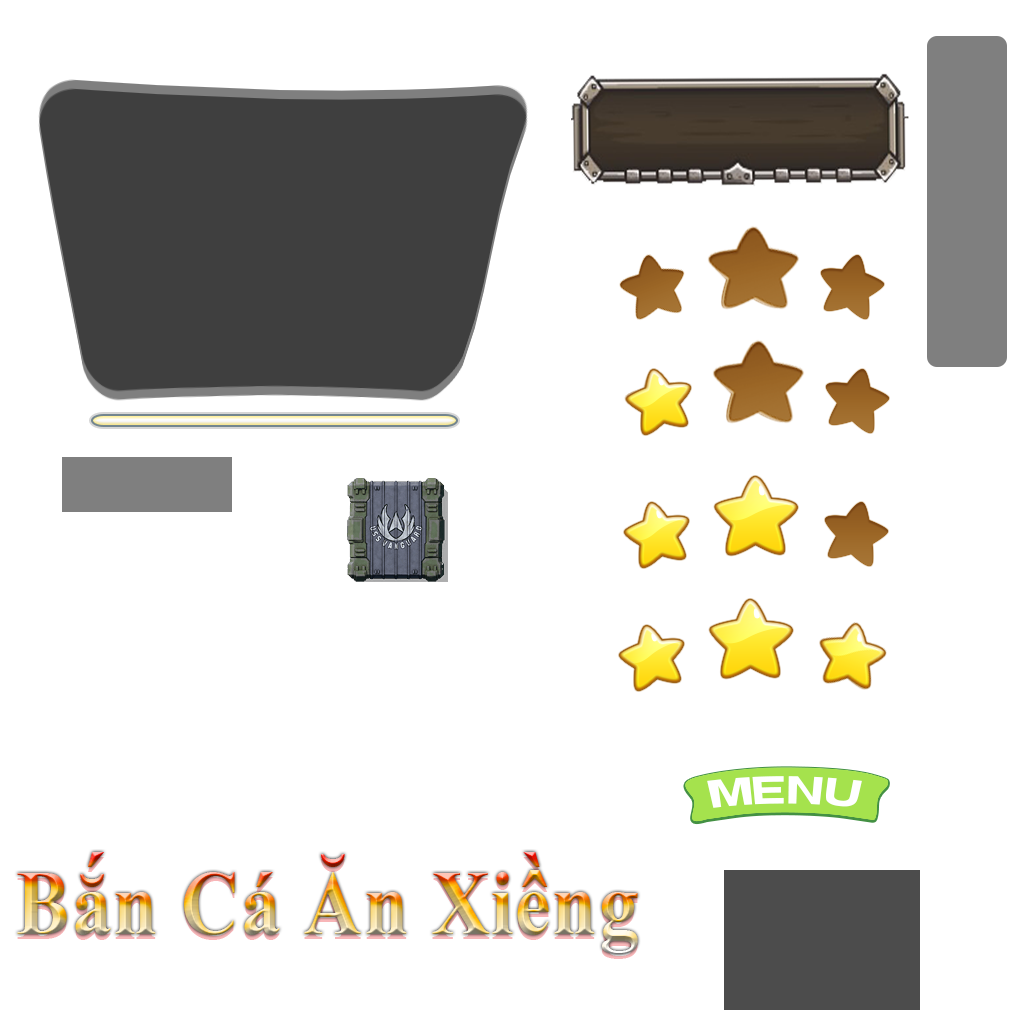
<style>
.page{position:relative;width:1024px;height:1024px;background:#ffffff}
.page>*{position:absolute;margin:0}
.t1{font:91.5px "TimesNewRomanPS-BoldMT";letter-spacing:0.02em;scale:0.88 1}
</style>
<div class="page">
<p class="t1" style="left:17px;top:857px;width:621px;height:102px">Bắn Cá Ăn Xiềng</p>
<p class="t1" style="left:17px;top:852px;width:621px;height:102px">Bắn Cá Ăn Xiềng</p>
</div>
